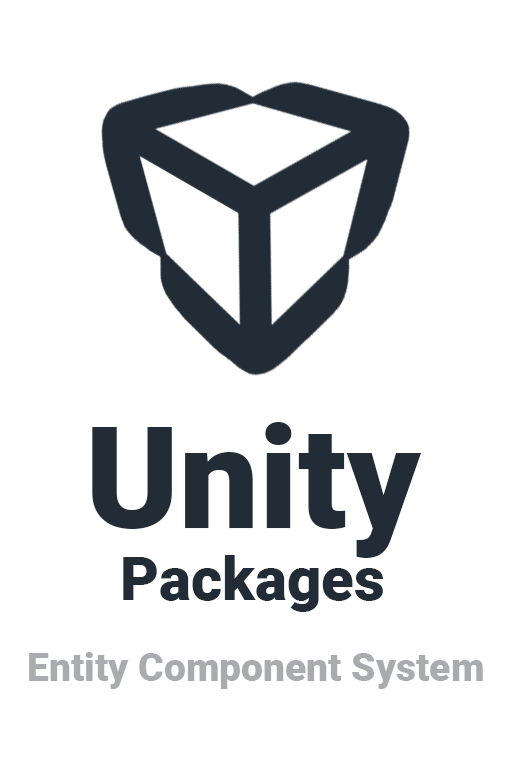
<style>
.page{position:relative;width:512px;height:769px;background:#ffffff}
.page>*{position:absolute;margin:0}
.t1{font:60px "Roboto-Black";color:#222c37}
.t2{font:142px "Roboto-Black";color:#222c37}
.t3{font:39px "Roboto-Black";color:#a9abae}
</style>
<div class="page">
<p class="t1" style="left:92px;top:422px;width:330px;height:190px;text-align:center"><span class="t2">Unity<br></span>Packages</p>
<p class="t3" style="left:29px;top:652px;width:454px;height:37px">Entity Component System</p>
</div>
